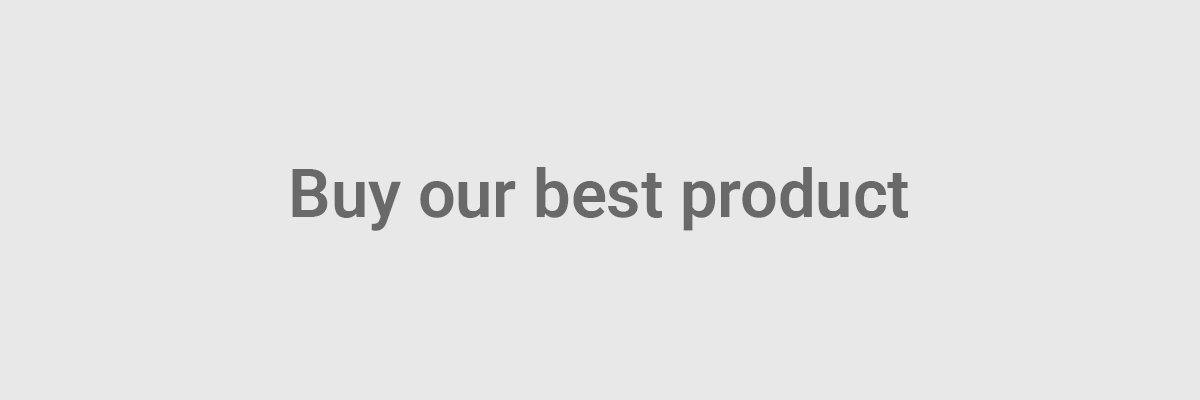
<style>
.page{position:relative;width:1200px;height:400px;background:#e8e8e8}
.page>*{position:absolute;margin:0}
.t1{font:66.7px "Roboto-SemiBold";color:#696969}
</style>
<div class="page">
<p class="t1" style="left:292px;top:167px;width:616px;height:64px">Buy our best product</p>
</div>
